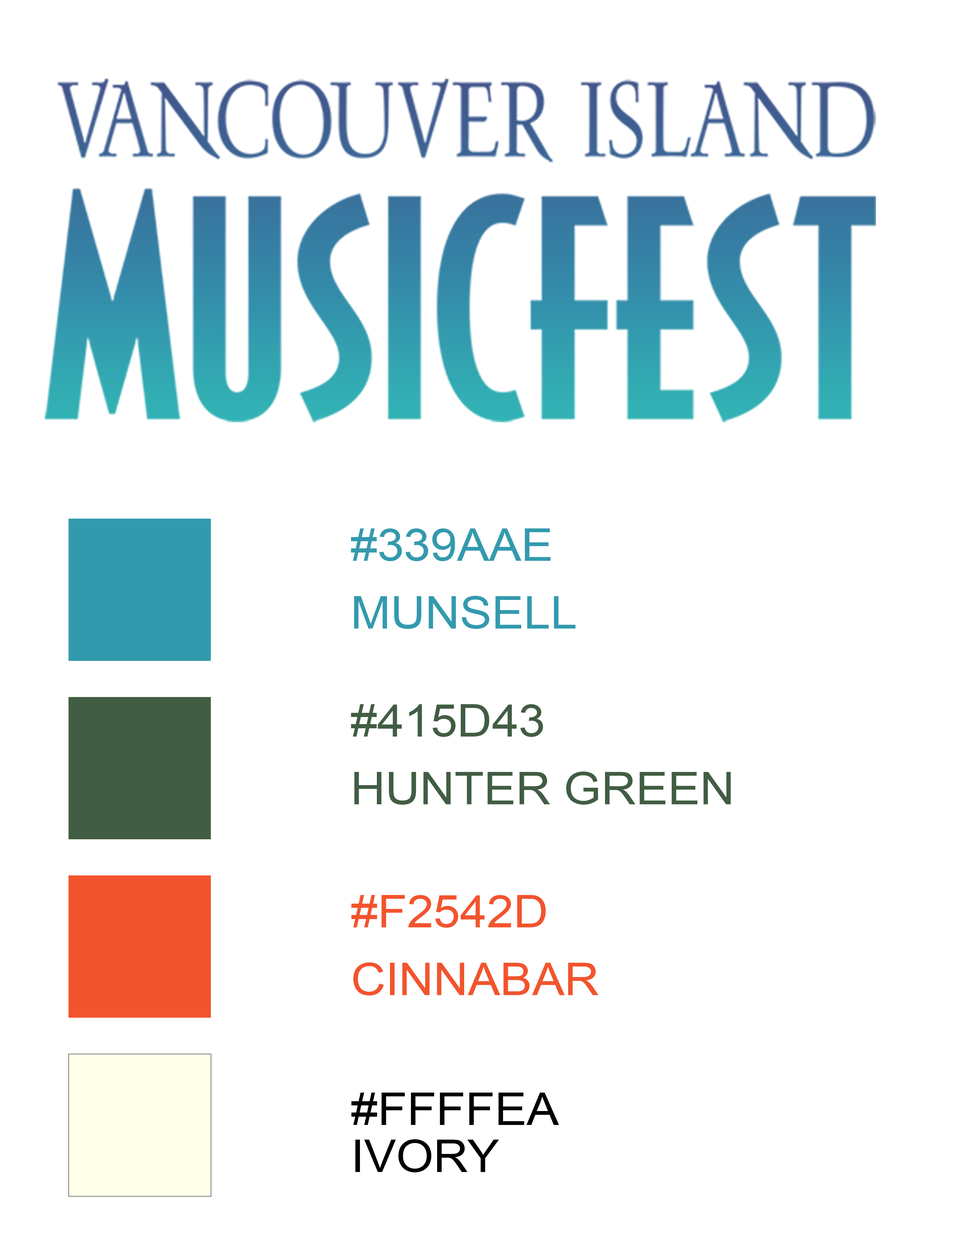
<style>
.page{position:relative;width:960px;height:1242px;background:#ffffff}
.page>*{position:absolute;margin:0}
.t1{font:45.2px "ArialMT";color:#339aae;text-transform:uppercase;scale:1.06 1}
.t2{font:45.2px "ArialMT";color:#415d43;text-transform:uppercase;scale:1.06 1}
.t3{font:45.2px "ArialMT";color:#f2542d;text-transform:uppercase;scale:1.06 1}
.t4{font:45.2px/47.1px "ArialMT";color:#000000;text-transform:uppercase;scale:1.06 1}
</style>
<div class="page">
<p class="t1" style="left:351px;top:529px;width:225px;height:100px">#339aae<br>Munsell</p>
<p class="t2" style="left:351px;top:704px;width:380px;height:101px">#415d43 <br>Hunter Green</p>
<p class="t3" style="left:351px;top:895px;width:248px;height:101px">#f2542d <br>Cinnabar</p>
<p class="t4" style="left:351px;top:1093px;width:208px;height:80px">#ffffea<br>Ivory</p>
</div>
